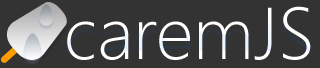
<style>
.page{position:relative;width:320px;height:68px;background:#333333}
.page>*{position:absolute;margin:0}
.t1{font:73.2px "SegoeUI-Light";color:#ffffff}
</style>
<div class="page">
<p class="t1" style="left:67px;top:6px;width:244px;height:54px">caremJS</p>
</div>
